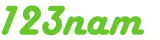
<style>
.page{position:relative;width:160px;height:40px;background:#ffffff}
.page>*{position:absolute;margin:0}
.t1{font:48px "HarlowSolid";color:#68c62d}
</style>
<div class="page">
<p class="t1" style="left:1px;top:5px;width:143px;height:31px">123nam</p>
</div>
